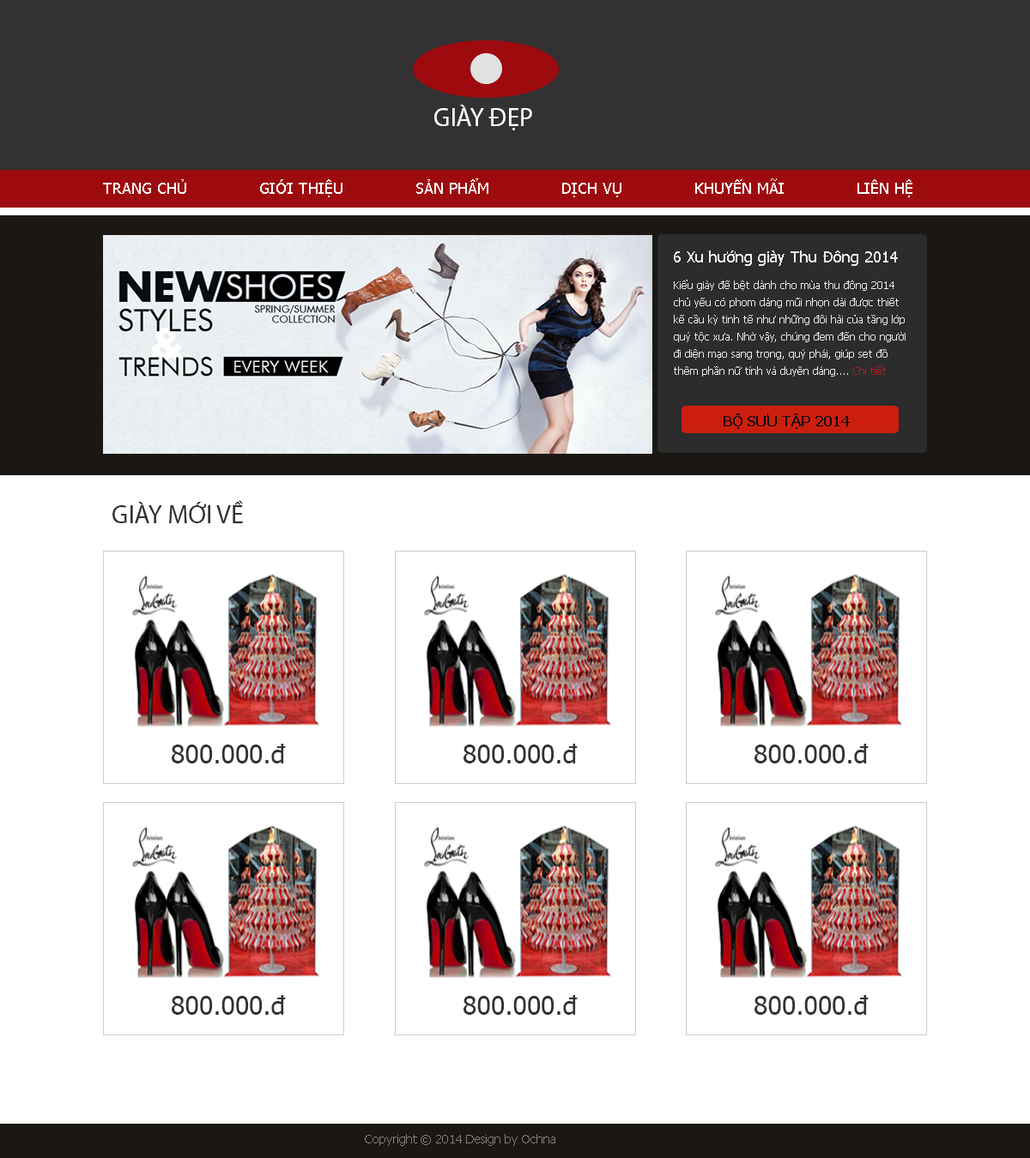
<style>
.page{position:relative;width:1030px;height:1158px;background:#ffffff}
.page>*{position:absolute;margin:0}
.t1{font:25.7px "MyriadPro-Regular";color:#fefefe}
.t2{font:15.4px "Tahoma";color:#fbfafa}
.t3{font:15.4px "Tahoma";color:#eeece7}
.t4{font:10.3px/17.2px "Tahoma";color:#eeece7}
.t5{font:10.3px/17.2px "Tahoma";color:#c91612}
.t6{font:13.7px "Tahoma-Bold";color:#0c0b0b}
.t7{font:25.7px "MyriadPro-Regular";color:#333131}
.t8{font:25.7px "Tahoma";color:#333131}
.t9{font:12px "Tahoma";color:#827f7f}
</style>
<div class="page">
<p class="t1" style="left:434px;top:105px;width:98px;height:25px">GIÀY ĐẸP</p>
<p class="t2" style="left:103px;top:178px;width:809px;height:19px">TRANG CHỦ              GIỚI THIỆU              SẢN PHẨM              DỊCH VỤ              KHUYẾN MÃI              LIÊN HỆ</p>
<p class="t3" style="left:673px;top:251px;width:224px;height:15px">6 Xu hướng giày Thu Đông 2014</p>
<p class="t4" style="left:673px;top:280px;width:232px;height:97px">Kiểu giày đế bệt dành cho mùa thu đông 2014 <br>chủ yếu có phom dáng mũi nhọn dài được thiết <br>kế cầu kỳ tinh tế như những đôi hài của tầng lớp <br>quý tộc xưa. Nhờ vậy, chúng đem đến cho người <br>đi diện mạo sang trọng, quý phái, giúp set đồ <br>thêm phần nữ tính và duyên dáng.... <span class="t5">Chi tiết</span></p>
<p class="t6" style="left:723px;top:414px;width:126px;height:15px">BỘ SƯU TẬP 2014</p>
<p class="t7" style="left:112px;top:500px;width:131px;height:23px">GIÀY MỚI VỀ</p>
<p class="t8" style="left:172px;top:744px;width:114px;height:20px">800.000.đ</p>
<p class="t8" style="left:463px;top:744px;width:114px;height:20px">800.000.đ</p>
<p class="t8" style="left:754px;top:744px;width:114px;height:20px">800.000.đ</p>
<p class="t8" style="left:172px;top:995px;width:114px;height:20px">800.000.đ</p>
<p class="t8" style="left:463px;top:995px;width:114px;height:20px">800.000.đ</p>
<p class="t8" style="left:754px;top:995px;width:114px;height:20px">800.000.đ</p>
<p class="t9" style="left:365px;top:1134px;width:190px;height:12px">Copyright © 2014 Design by Ochna</p>
</div>
